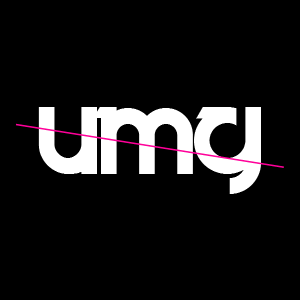
<style>
.page{position:relative;width:300px;height:300px;background:#000000}
.page>*{position:absolute;margin:0}
.t1{font:96px "Velocity";color:#ffffff}
</style>
<div class="page">
<p class="t1" style="left:38px;top:107px;width:223px;height:87px">umg</p>
</div>
